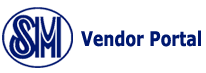
<style>
.page{position:relative;width:206px;height:73px;background:#ffffff}
.page>*{position:absolute;margin:0}
.t1{font:20.1px "Verdana-Bold";color:#001870;scale:0.78 1}
</style>
<div class="page">
<p class="t1" style="left:81px;top:30px;width:120px;height:17px">Vendor Portal</p>
</div>
